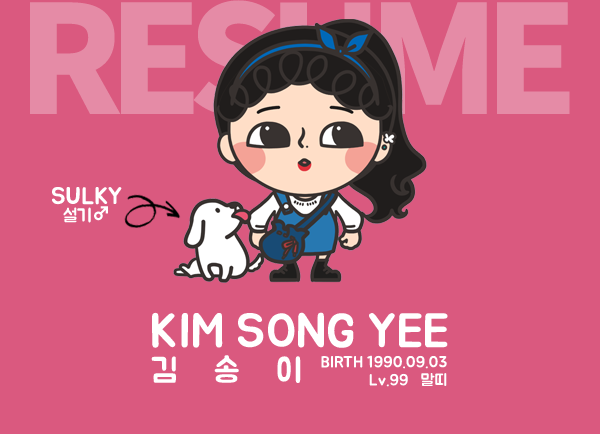
<style>
.page{position:relative;width:600px;height:434px;background:#da597f}
.page>*{position:absolute;margin:0}
.t1{font:150px "NotoSansCJKkr-Black";letter-spacing:-0.1em;color:#e58ba6}
.t2{font:24px/18px "BMJUA";color:#ffffff}
.t3{font:18px/18px "BMJUA";color:#ffffff}
.t4{font:18px/18px "NotoSansCJKkr-Black";color:#ffffff}
.t5{font:48px "BMJUA";color:#ffffff}
.t6{font:33px "BMJUA";letter-spacing:0.2em;color:#ffffff}
.t7{font:16px/18px "BMJUA";letter-spacing:0.005em;color:#ffffff}
</style>
<div class="page">
<p class="t1" style="left:30px;top:0px;width:540px;height:116px">RESUME</p>
<p class="t2" style="left:52px;top:187px;width:70px;height:36px;text-align:center">SULKY<br><span class="t3">설기</span><span class="t4">♂</span></p>
<p class="t5" style="left:152px;top:312px;width:296px;height:36px">KIM SONG YEE</p>
<p class="t6" style="left:151px;top:355px;width:150px;height:28px">김  송  이</p>
<p class="t7" style="left:321px;top:355px;width:126px;height:32px;text-align:right">BIRTH 1990.09.03<br>Lv.99   말띠</p>
</div>
